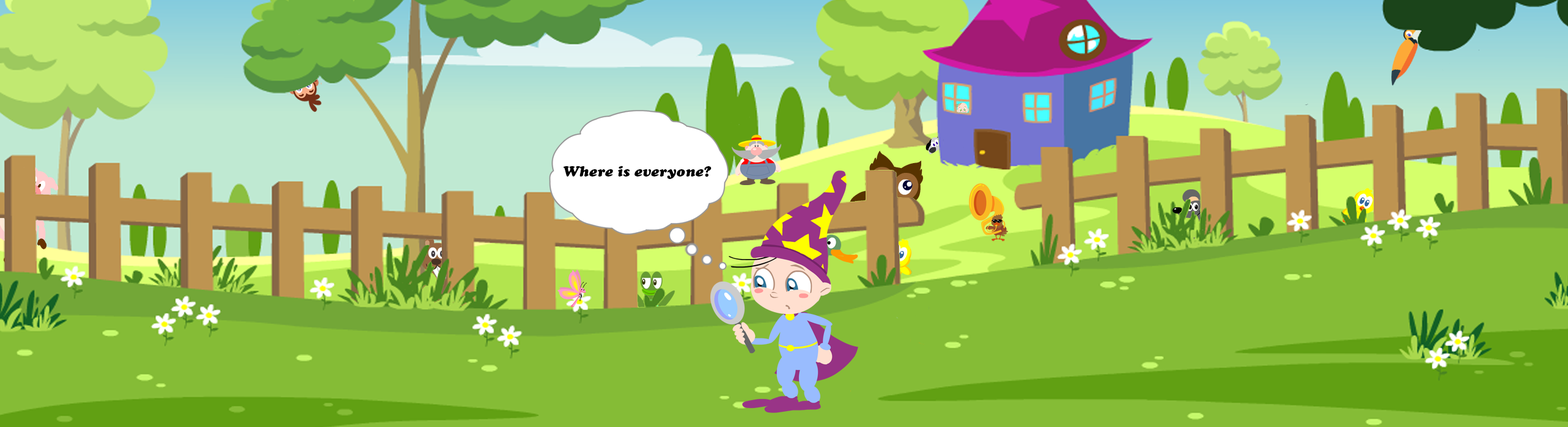
<style>
.page{position:relative;width:1568px;height:427px;background:#85bc36}
.page>*{position:absolute;margin:0}
.t1{font:14.7px "CooperBlackStd-Italic";color:#000000}
</style>
<div class="page">
<p class="t1" style="left:563px;top:166px;width:149px;height:13px">Where is everyone?</p>
</div>
